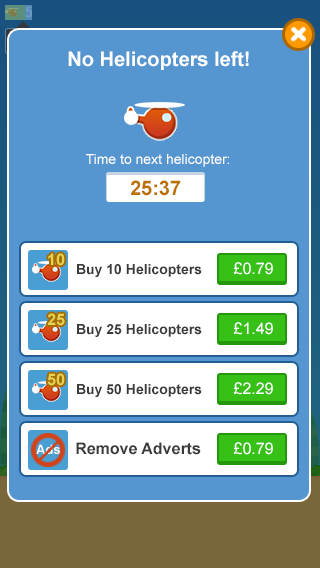
<style>
.page{position:relative;width:320px;height:568px;background:#5596d0}
.page>*{position:absolute;margin:0}
.t1{font:20px "Arial-BoldMT";color:#ffffff}
.t2{font:14px "ArialMT";color:#ffffff}
.t3{font:20px "Arial-BoldMT";color:#bb7101}
.t4{font:16px "Arial-BoldMT";color:#e5d251}
.t5{font:14px "Arial-BoldMT";color:#3a3a3a}
.t6{font:16px "ArialMT";color:#ffffff}
.t7{font:13px "Arial-BoldMT";color:#ffffff}
.t8{font:16px "Arial-BoldMT";color:#3a3a3a}
</style>
<div class="page">
<p class="t1" style="left:68px;top:51px;width:181px;height:19px">No Helicopters left!</p>
<p class="t2" style="left:86px;top:154px;width:143px;height:13px">Time to next helicopter:</p>
<p class="t3" style="left:130px;top:180px;width:51px;height:16px">25:37</p>
<p class="t4" style="left:48px;top:253px;width:17px;height:13px">10</p>
<p class="t5" style="left:77px;top:264px;width:125px;height:13px">Buy 10 Helicopters</p>
<p class="t6" style="left:233px;top:262px;width:40px;height:13px">£0.79</p>
<p class="t4" style="left:47px;top:313px;width:18px;height:13px">25</p>
<p class="t5" style="left:77px;top:324px;width:125px;height:13px">Buy 25 Helicopters</p>
<p class="t6" style="left:233px;top:322px;width:40px;height:13px">£1.49</p>
<p class="t4" style="left:47px;top:373px;width:18px;height:13px">50</p>
<p class="t5" style="left:77px;top:384px;width:125px;height:13px">Buy 50 Helicopters</p>
<p class="t6" style="left:233px;top:382px;width:40px;height:13px">£2.29</p>
<p class="t7" style="left:36px;top:444px;width:24px;height:10px">Ads</p>
<p class="t8" style="left:76px;top:442px;width:125px;height:13px">Remove Adverts</p>
<p class="t6" style="left:233px;top:442px;width:40px;height:13px">£0.79</p>
</div>
